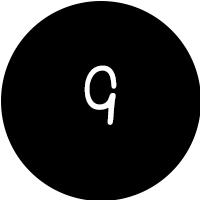
<style>
.page{position:relative;width:200px;height:200px;background:#000000}
.page>*{position:absolute;margin:0}
.t1{font:80px "DFGirl-W3-WIN-BF";color:#ffffff}
</style>
<div class="page">
<p class="t1" style="left:84px;top:65px;width:33px;height:60px">9</p>
</div>
